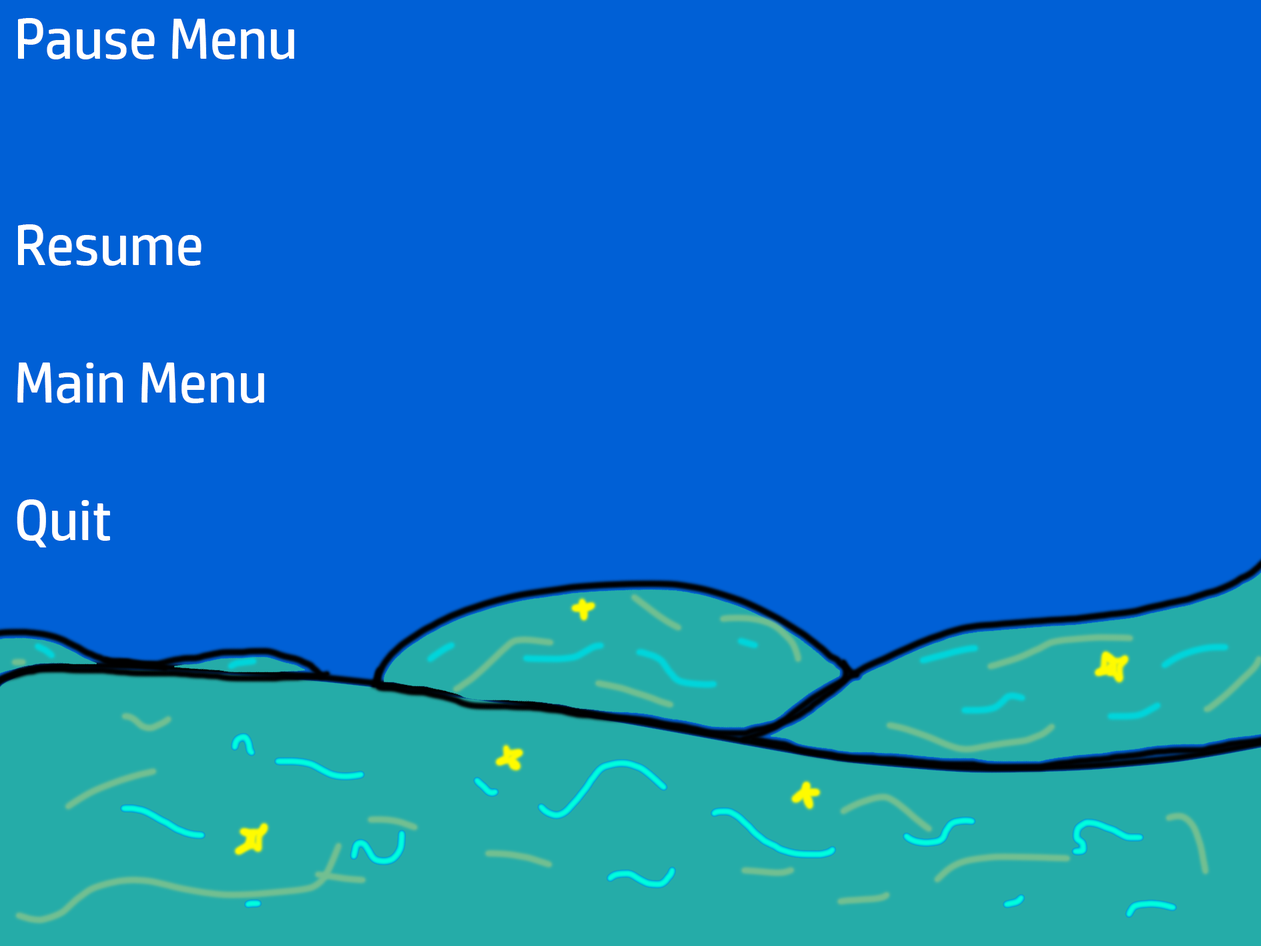
<style>
.page{position:relative;width:1261px;height:946px;background:#0060d6}
.page>*{position:absolute;margin:0}
.t1{font:57.3px "HPSimplified-Regular";color:#ffffff}
</style>
<div class="page">
<p class="t1" style="left:17px;top:18px;width:277px;height:529px">Pause Menu<br><br><br>Resume<br><br>Main Menu<br><br>Quit</p>
</div>
